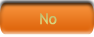
<style>
.page{position:relative;width:94px;height:37px}
.page>*{position:absolute;margin:0}
.t1{font:15px "TrebuchetMS";color:#cdca78}
</style>
<div class="page">
<p class="t1" style="left:40px;top:13px;width:17px;height:12px">No</p>
</div>
